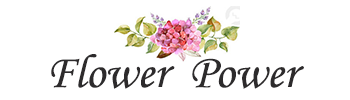
<style>
.page{position:relative;width:350px;height:100px;background:#ffffff}
.page>*{position:absolute;margin:0}
.t1{font:48px "MonotypeCorsiva";color:#2d2b2c}
</style>
<div class="page">
<p class="t1" style="left:51px;top:54px;width:253px;height:35px">Flower  Power</p>
</div>
